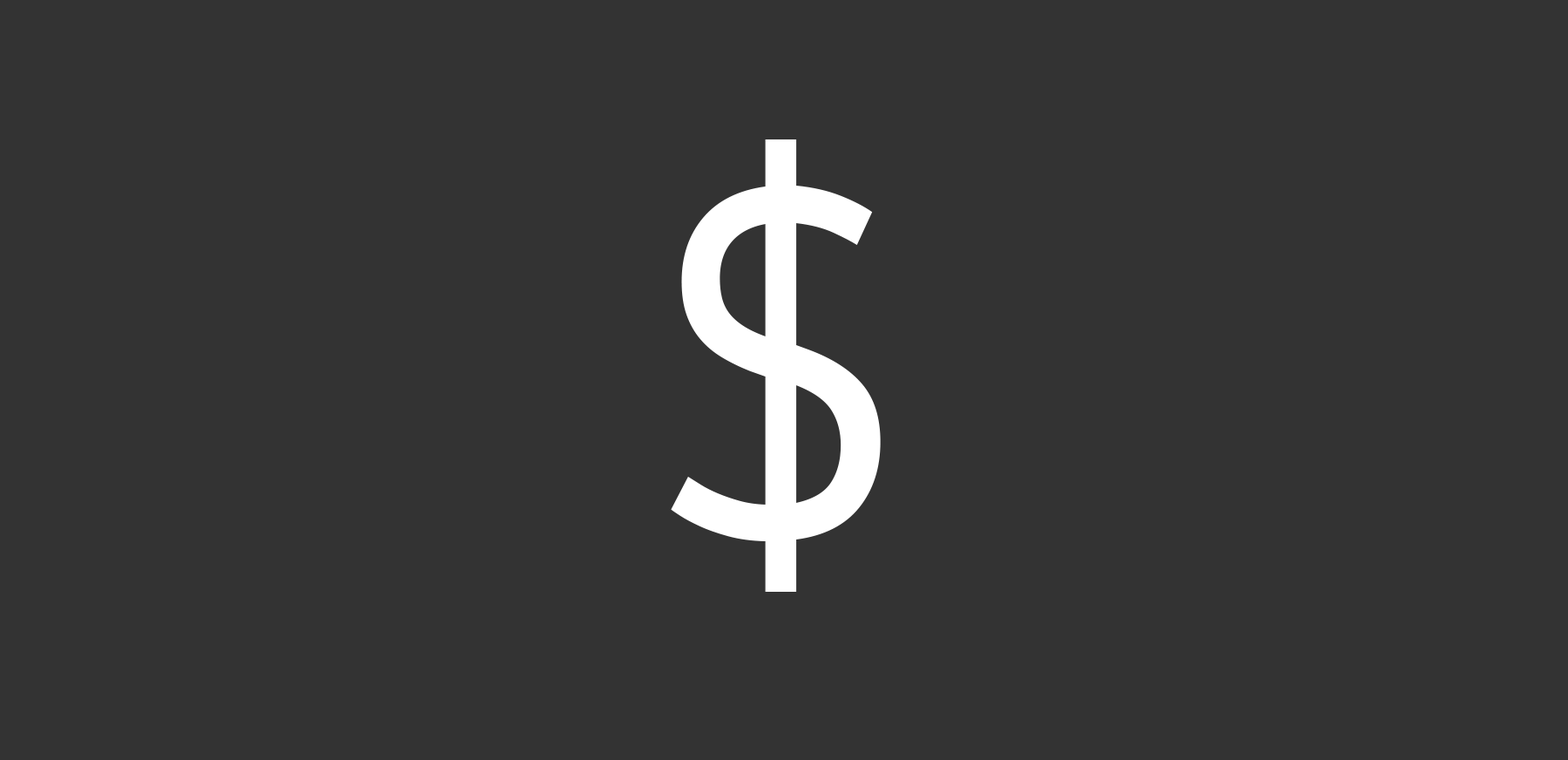
<style>
.page{position:relative;width:1568px;height:760px;background:#333333}
.page>*{position:absolute;margin:0}
.t1{font:502.4px "NokiaPureText-Regular";letter-spacing:-0.02em;color:#ffffff;scale:0.92 1}
</style>
<div class="page">
<p class="t1" style="left:671px;top:139px;width:210px;height:452px">$</p>
</div>
